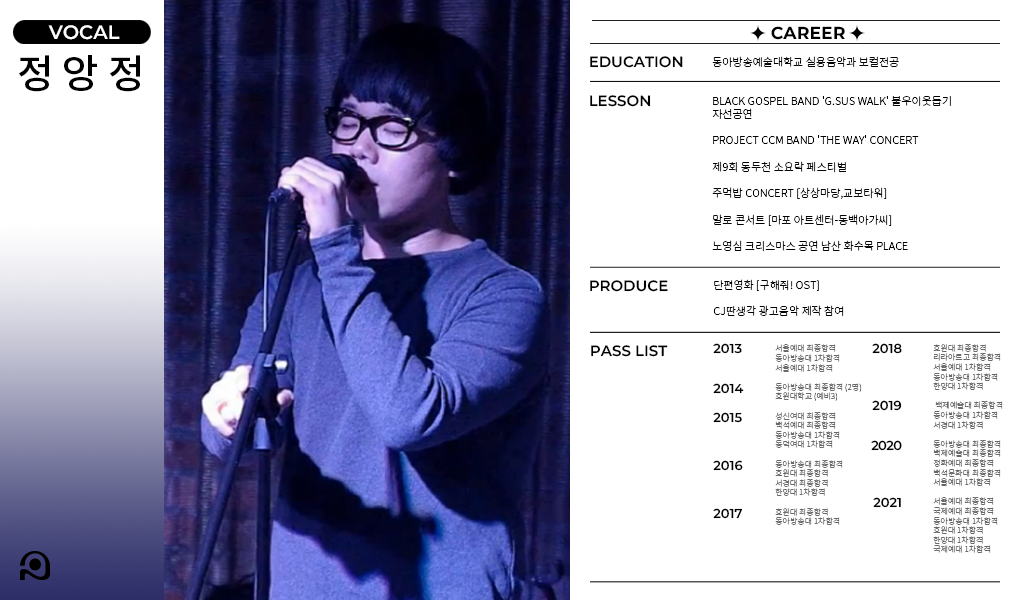
<style>
.page{position:relative;width:1020px;height:600px;background:#ffffff}
.page>*{position:absolute;margin:0}
.t1{font:19.4px "Montserrat-SemiBold";color:#fffefe}
.t2{font:17.3px "Montserrat-Bold";color:#000000}
.t3{font:39.9px "NotoSansKR-Medium";color:#000000}
.t4{font:15px "Montserrat-SemiBold";color:#000000}
.t5{font:11px "NotoSansKR-Light";color:#000000}
.t6{font:13px "Montserrat-SemiBold";color:#000000}
.t7{font:8px "NotoSansKR-Light";color:#696969}
.t8{font:13px "Montserrat-SemiBold";letter-spacing:-0.05em;color:#000000}
</style>
<div class="page">
<p class="t1" style="left:48px;top:25px;width:72px;height:15px">VOCAL</p>
<p class="t2" style="left:771px;top:26px;width:74px;height:14px">CAREER</p>
<p class="t3" style="left:19px;top:55px;width:121px;height:37px">정 앙 정</p>
<p class="t4" style="left:590px;top:56px;width:93px;height:12px">EDUCATION</p>
<p class="t5" style="left:712px;top:56px;width:187px;height:11px">동아방송예술대학교 실용음악과 보컬전공</p>
<p class="t4" style="left:590px;top:95px;width:61px;height:12px">LESSON</p>
<p class="t5" style="left:712px;top:95px;width:239px;height:157px">BLACK GOSPEL BAND 'G.SUS WALK' 불우이웃돕기 자선공연<br><br>PROJECT CCM BAND 'THE WAY' CONCERT<br><br>제9회 동두천 소요락 페스티벌<br><br>주먹밥 CONCERT [상상마당,교보타워]<br><br>말로 콘서트 [마포 아트센터-동백아가씨]<br><br>노영심 크리스마스 공연 남산 화수목 PLACE</p>
<p class="t4" style="left:590px;top:280px;width:78px;height:12px">PRODUCE</p>
<p class="t5" style="left:713px;top:279px;width:131px;height:37px">단편영화 [구해줘! OST]<br><br>CJ딴생각 광고음악 제작 참여</p>
<p class="t4" style="left:591px;top:345px;width:77px;height:12px">PASS LIST</p>
<p class="t6" style="left:713px;top:343px;width:29px;height:11px">2013</p>
<p class="t7" style="left:775px;top:344px;width:87px;height:181px">서울예대 최종합격<br>동아방송대 1차합격<br>서울예대 1차합격<br><br>동아방송대 최종합격 (2명)<br>호원대학교 (예비3)<br><br>성신여대 최종합격<br>백석예대 최종합격<br>동아방송대 1차합격<br>동덕여대 1차합격<br><br>동아방송대 최종합격<br>호원대 최종합격<br>서경대 최종합격<br>한양대　1차합격<br><br>호원대 최종합격<br>동아방송대 1차합격</p>
<p class="t6" style="left:872px;top:343px;width:30px;height:11px">2018</p>
<p class="t7" style="left:933px;top:344px;width:70px;height:209px">호원대 최종합격<br>리라아트고 최종합격<br>서울예대 1차합격<br>동아방송대 1차합격<br>한양대 1차합격<br><br> 백제예술대 최종합격<br>동아방송대 1차합격<br>서경대 1차합격<br><br>동아방송대 최종합격<br>백제예술대 최종합격<br>정화예대 최종합격<br>백석문화대 최종합격<br>서울예대 1차합격<br><br>서울예대 최종합격<br>국제예대 최종합격<br>동아방송대 1차합격<br>호원대 1차합격<br>한양대 1차합격<br>국제예대 1차합격</p>
<p class="t6" style="left:713px;top:383px;width:31px;height:11px">2014</p>
<p class="t6" style="left:872px;top:400px;width:30px;height:11px">2019</p>
<p class="t6" style="left:713px;top:412px;width:29px;height:11px">2015</p>
<p class="t8" style="left:871px;top:440px;width:31px;height:11px">2020</p>
<p class="t6" style="left:713px;top:460px;width:30px;height:11px">2016</p>
<p class="t6" style="left:873px;top:497px;width:28px;height:11px">2021</p>
<p class="t6" style="left:713px;top:508px;width:30px;height:11px">2017</p>
</div>
